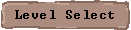
<style>
.page{position:relative;width:131px;height:30px;background:#ab8c7f}
.page>*{position:absolute;margin:0}
.t1{font:13px "Terminal";letter-spacing:0.04em;color:#000000}
</style>
<div class="page">
<p class="t1" style="left:15px;top:10px;width:99px;height:9px">Level Select</p>
</div>
